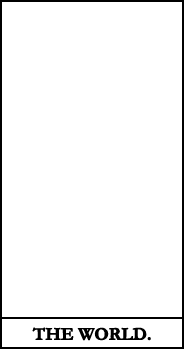
<style>
.page{position:relative;width:184px;height:349px;background:#ffffff}
.page>*{position:absolute;margin:0}
.t1{font:18px "Garamond-Bold";letter-spacing:-0.025em;color:#000000;font-weight:bold}
</style>
<div class="page">
<p class="t1" style="left:32px;top:327px;width:119px;height:14px">THE WORLD.</p>
</div>
